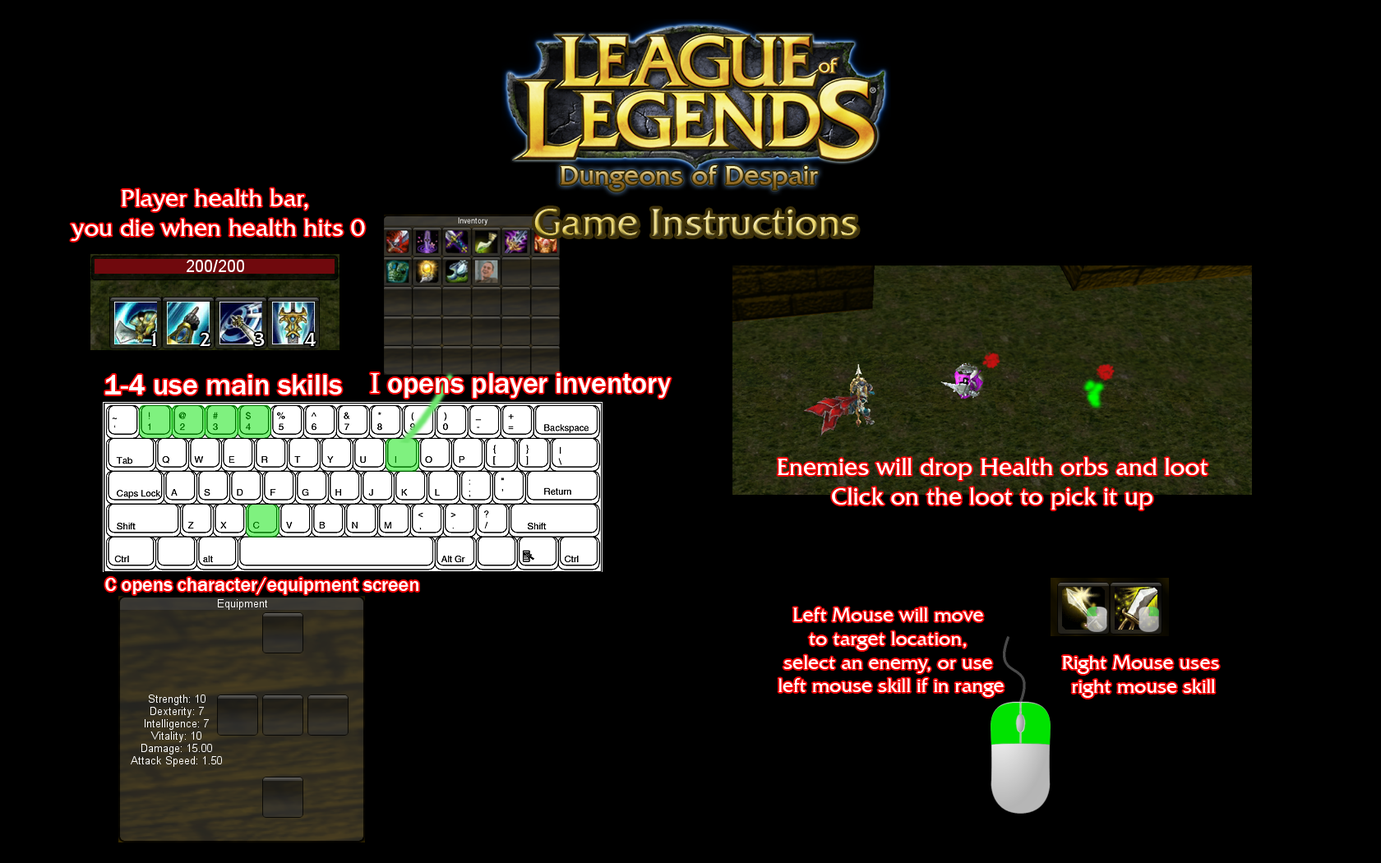
<style>
.page{position:relative;width:1381px;height:863px;background:#000000}
.page>*{position:absolute;margin:0}
.t1{font:24.7px "FrizQuadrataITCbyBT-Roman";color:#ffffff}
.t2{font:39.5px "FrizQuadrataITCbyBT-Roman"}
.t3{font:19.7px "FrizQuadrataITCbyBT-Roman";color:#ffffff}
.t4{font:29.6px "FranklinGothic-Medium";color:#ffffff}
.t5{font:29.6px "TimesNewRomanPSMT";color:#ffffff}
.t6{font:19.7px "FranklinGothic-Medium";color:#ffffff}
</style>
<div class="page">
<p class="t1" style="left:71px;top:188px;width:294px;height:53px;text-align:center">Player health bar, <br>you die when health hits 0</p>
<p class="t2" style="left:534px;top:209px;width:324px;height:27px">Game Instructions</p>
<p class="t3" style="left:151px;top:332px;width:5px;height:14px">1</p>
<p class="t3" style="left:200px;top:333px;width:10px;height:13px">2</p>
<p class="t3" style="left:254px;top:333px;width:11px;height:13px">3</p>
<p class="t3" style="left:304px;top:333px;width:13px;height:13px">4</p>
<p class="t4" style="left:105px;top:375px;width:237px;height:20px">1-4 use main skills</p>
<p class="t4" style="left:370px;top:373px;width:301px;height:25px"><span class="t5">I</span> opens player inventory</p>
<p class="t1" style="left:778px;top:457px;width:430px;height:53px;text-align:center">Enemies will drop Health orbs and loot<br>Click on the loot to pick it up</p>
<p class="t6" style="left:105px;top:578px;width:313px;height:16px">C opens character/equipment screen</p>
<p class="t3" style="left:779px;top:608px;width:225px;height:89px;text-align:center">Left Mouse will move <br>to target location, <br>select an enemy, or use <br>left mouse skill if in range</p>
<p class="t3" style="left:1062px;top:655px;width:157px;height:43px;text-align:center">Right Mouse uses <br>right mouse skill</p>
</div>
